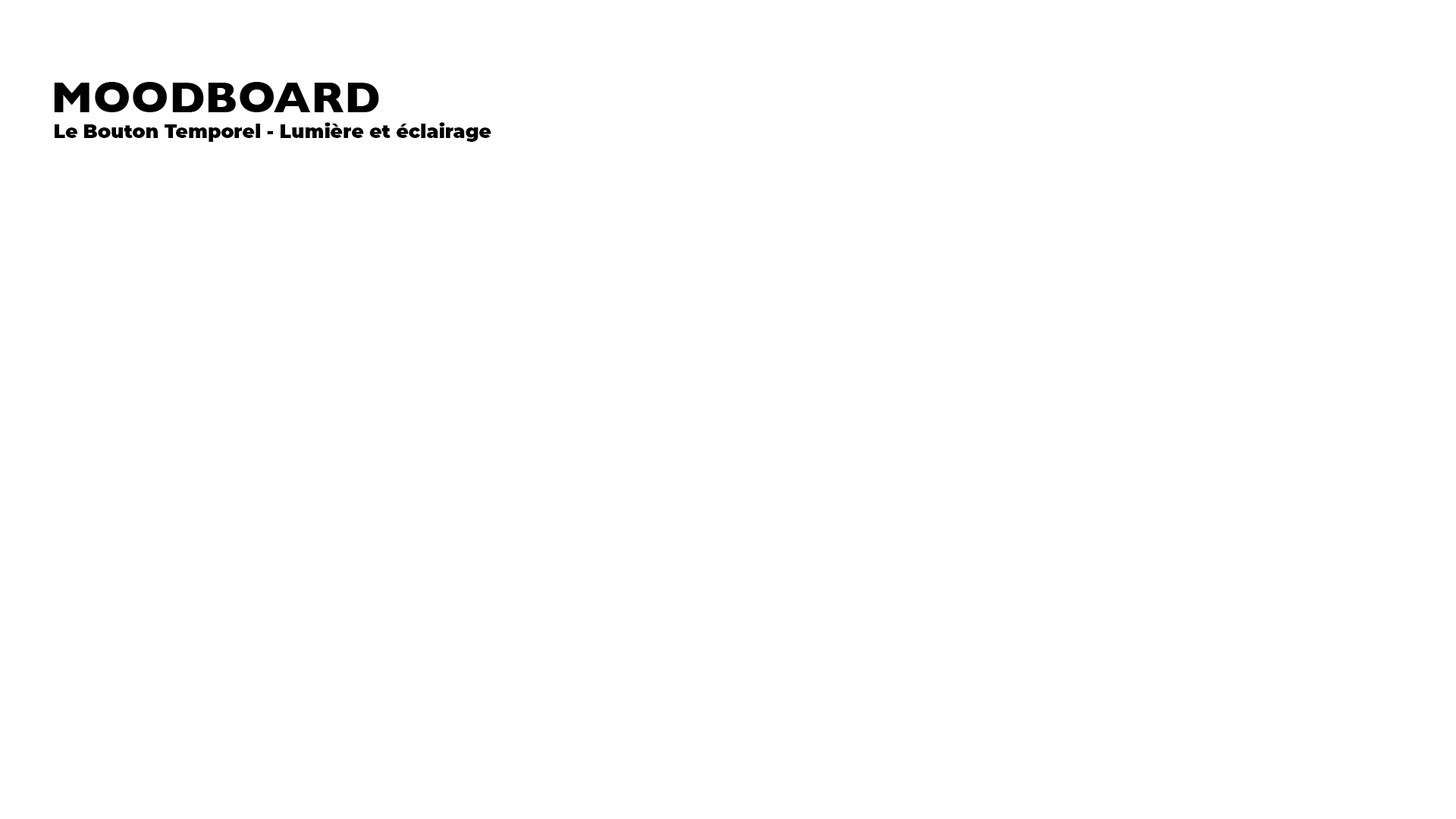
<style>
.page{position:relative;width:1456px;height:819px;background:#ffffff}
.page>*{position:absolute;margin:0}
.t1{font:44.2px "GillSans-Bold";color:#000000}
.t2{font:19px "Montserrat-Black";color:#000000}
</style>
<div class="page">
<p class="t1" style="left:54px;top:82px;width:325px;height:30px">MOODBOARD</p>
<p class="t2" style="left:55px;top:122px;width:436px;height:20px">Le Bouton Temporel - Lumière et éclairage</p>
</div>
